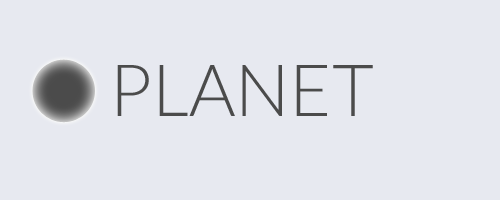
<style>
.page{position:relative;width:500px;height:200px;background:#e7e9f0}
.page>*{position:absolute;margin:0}
.t1{font:72px "Lato-Light";color:#4b4b4b}
</style>
<div class="page">
<p class="t1" style="left:117px;top:65px;width:256px;height:51px">PLANET</p>
</div>
